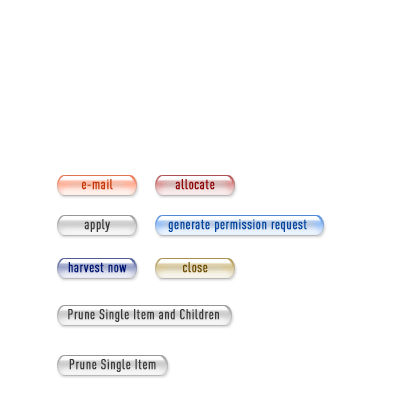
<style>
.page{position:relative;width:400px;height:400px;background:#ffffff}
.page>*{position:absolute;margin:0}
.t1{font:14px "DINCond-Regular";letter-spacing:0.025em;color:#c43300;font-weight:bold}
.t2{font:14px "DINCond-Regular";letter-spacing:0.025em;color:#8d0000;font-weight:bold}
.t3{font:14px "DINCond-Regular";letter-spacing:0.025em;color:#3b3a3a;font-weight:bold}
.t4{font:14px "DINCond-Regular";letter-spacing:0.025em;color:#00439e;font-weight:bold}
.t5{font:14px "DINCond-Regular";letter-spacing:0.025em;color:#001572;font-weight:bold}
.t6{font:14px "DINCond-Regular";letter-spacing:0.025em;color:#6a4b00;font-weight:bold}
</style>
<div class="page">
<p class="t1" style="left:82px;top:179px;width:31px;height:11px">e-mail</p>
<p class="t2" style="left:175px;top:179px;width:40px;height:11px">allocate</p>
<p class="t3" style="left:84px;top:219px;width:26px;height:13px">apply</p>
<p class="t4" style="left:168px;top:219px;width:139px;height:13px">generate permission request</p>
<p class="t5" style="left:68px;top:262px;width:59px;height:11px">harvest now</p>
<p class="t6" style="left:183px;top:262px;width:25px;height:11px">close</p>
<p class="t3" style="left:68px;top:309px;width:151px;height:13px">Prune Single Item and Children</p>
<p class="t3" style="left:69px;top:359px;width:87px;height:13px">Prune Single Item</p>
</div>
